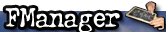
<style>
.page{position:relative;width:166px;height:32px;background:#ffffff}
.page>*{position:absolute;margin:0}
.t1{font:30.4px "TypewriterOldstyle";color:#fefdfd;scale:0.92 1}
</style>
<div class="page">
<p class="t1" style="left:5px;top:7px;width:115px;height:26px">FManager</p>
</div>
